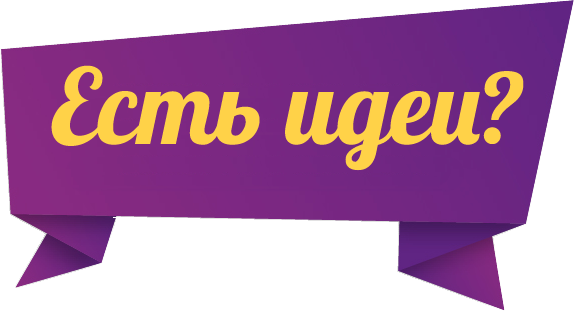
<style>
.page{position:relative;width:574px;height:311px;background:#ffffff}
.page>*{position:absolute;margin:0}
.t1{font:104.2px "Lobster";color:#ffd248}
</style>
<div class="page">
<p class="t1" style="left:51px;top:65px;width:473px;height:106px">Есть идеи?</p>
</div>
